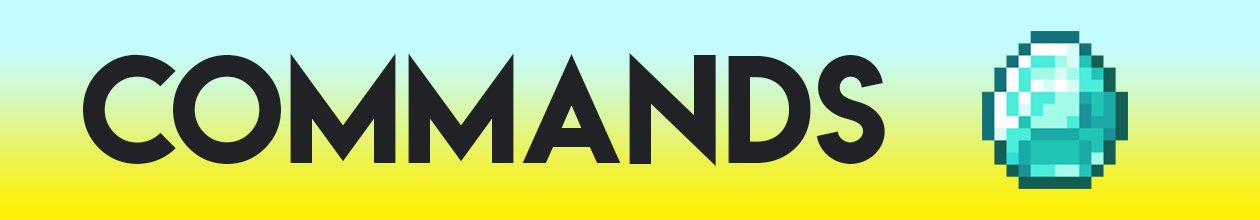
<style>
.page{position:relative;width:1260px;height:220px;background:#c5fcff}
.page>*{position:absolute;margin:0}
.t1{font:136px "LemonMilk";color:#202225}
</style>
<div class="page">
<p class="t1" style="left:83px;top:53px;width:802px;height:114px">COMMANDS</p>
</div>
